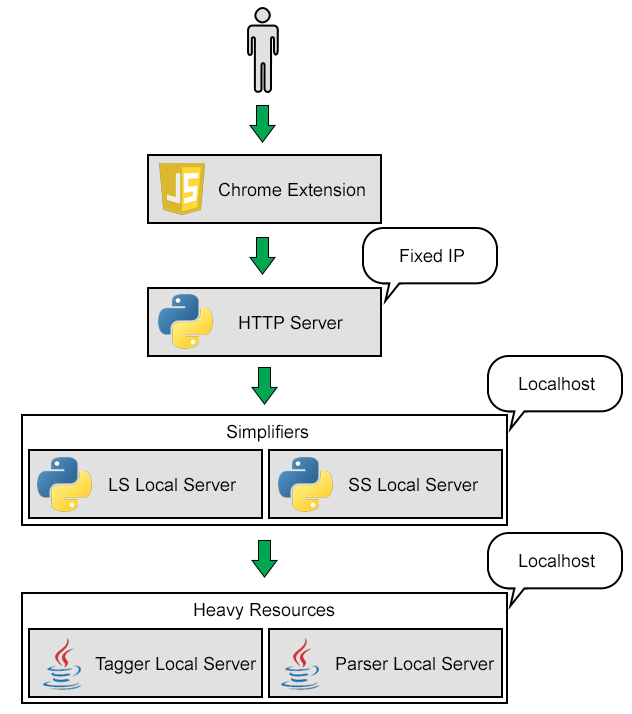
<style>
.page{position:relative;width:632px;height:714px;background:#ffffff}
.page>*{position:absolute;margin:0}
.t1{font:18px "ArialMT";color:#000000}
</style>
<div class="page">
<p class="t1" style="left:219px;top:182px;width:146px;height:15px">Chrome Extension</p>
<p class="t1" style="left:400px;top:249px;width:64px;height:14px">Fixed IP</p>
<p class="t1" style="left:239px;top:315px;width:104px;height:15px">HTTP Server</p>
<p class="t1" style="left:519px;top:377px;width:76px;height:14px">Localhost</p>
<p class="t1" style="left:227px;top:424px;width:82px;height:18px">Simplifiers</p>
<p class="t1" style="left:109px;top:477px;width:128px;height:15px">LS Local Server</p>
<p class="t1" style="left:349px;top:477px;width:130px;height:15px">SS Local Server</p>
<p class="t1" style="left:519px;top:554px;width:76px;height:14px">Localhost</p>
<p class="t1" style="left:194px;top:603px;width:141px;height:17px">Heavy Resources</p>
<p class="t1" style="left:95px;top:656px;width:162px;height:18px">Tagger Local Server</p>
<p class="t1" style="left:336px;top:656px;width:159px;height:15px">Parser Local Server</p>
</div>
